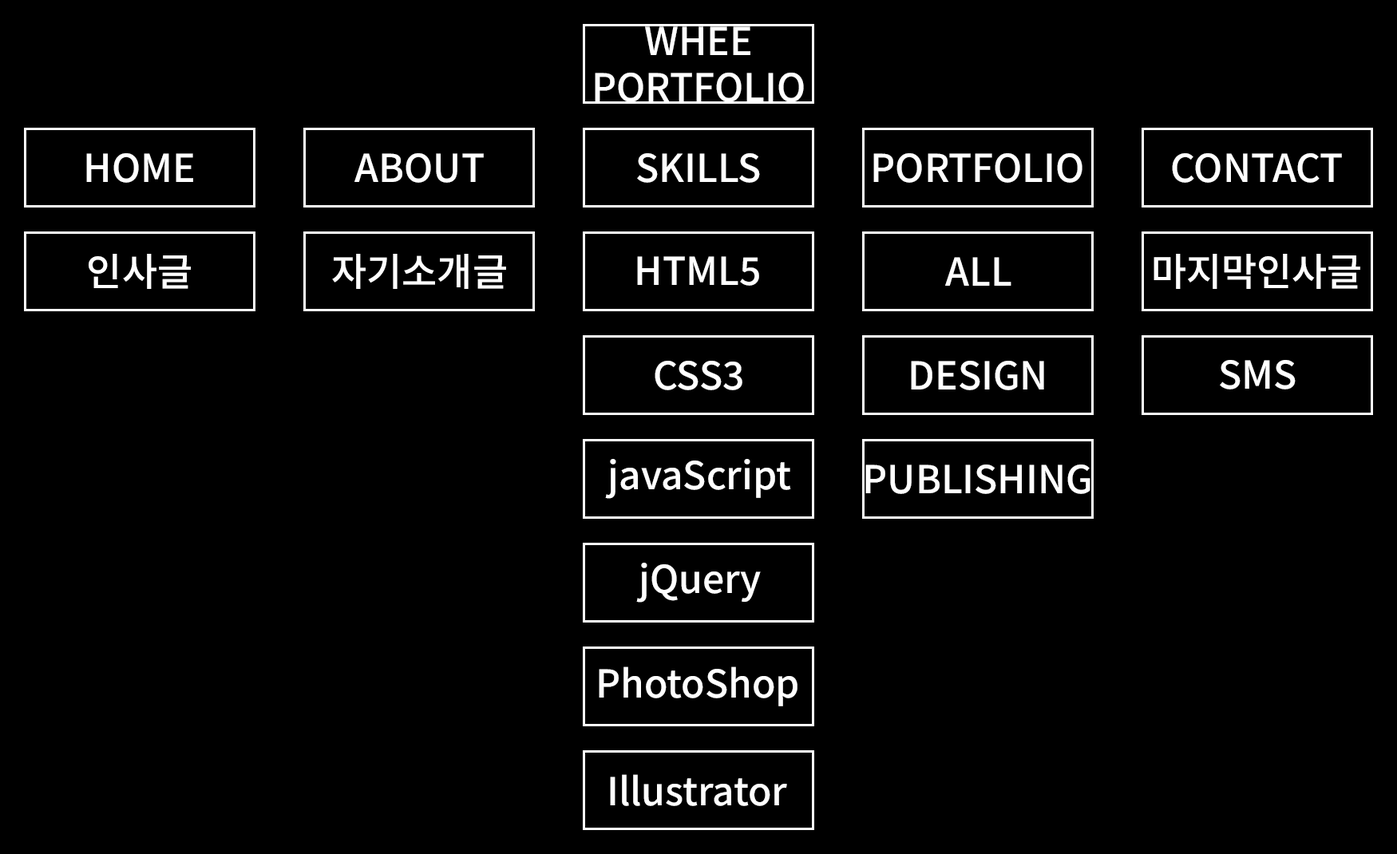
<style>
.page{position:relative;width:1397px;height:854px;background:#000000}
.page>*{position:absolute;margin:0}
.t1{font:38.3px "NotoSansKR-Medium";color:#ffffff}
.t2{font:38.3px/20.7px "NotoSansKR-Medium";color:#ffffff}
</style>
<div class="page">
<p class="t1" style="left:595px;top:26px;width:209px;height:76px;text-align:center"><span class="t2">WHEE</span><br>PORTFOLIO</p>
<p class="t1" style="left:86px;top:153px;width:107px;height:30px">HOME</p>
<p class="t1" style="left:354px;top:153px;width:130px;height:30px">ABOUT</p>
<p class="t1" style="left:637px;top:153px;width:123px;height:30px">SKILLS</p>
<p class="t1" style="left:873px;top:153px;width:209px;height:30px">PORTFOLIO</p>
<p class="t1" style="left:1171px;top:153px;width:170px;height:30px">CONTACT</p>
<p class="t1" style="left:89px;top:254px;width:102px;height:35px">인사글</p>
<p class="t1" style="left:332px;top:254px;width:174px;height:35px">자기소개글</p>
<p class="t1" style="left:637px;top:256px;width:122px;height:30px">HTML5</p>
<p class="t1" style="left:945px;top:257px;width:66px;height:29px">ALL</p>
<p class="t1" style="left:1153px;top:254px;width:207px;height:35px">마지막인사글</p>
<p class="t1" style="left:654px;top:361px;width:88px;height:29px">CSS3</p>
<p class="t1" style="left:911px;top:361px;width:133px;height:29px">DESIGN</p>
<p class="t1" style="left:1219px;top:360px;width:76px;height:29px">SMS</p>
<p class="t1" style="left:605px;top:459px;width:186px;height:40px">javaScript</p>
<p class="t1" style="left:865px;top:464px;width:225px;height:30px">PUBLISHING</p>
<p class="t1" style="left:636px;top:563px;width:124px;height:39px">jQuery</p>
<p class="t1" style="left:599px;top:666px;width:198px;height:40px">PhotoShop</p>
<p class="t1" style="left:610px;top:774px;width:177px;height:32px">Illustrator</p>
</div>
